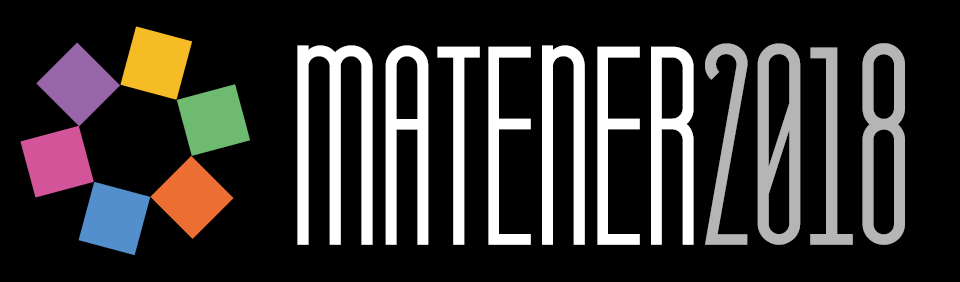
<style>
.page{position:relative;width:960px;height:282px;background:#000000}
.page>*{position:absolute;margin:0}
.t1{font:272.1px "Komoda-Regular";color:#ffffff}
.t2{font:272.1px "Komoda-Regular";color:#b5b5b5}
</style>
<div class="page">
<p class="t1" style="left:297px;top:43px;width:608px;height:202px">maTENER<span class="t2">2018</span></p>
</div>
